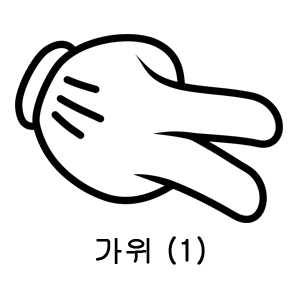
<style>
.page{position:relative;width:300px;height:300px;background:#ffffff}
.page>*{position:absolute;margin:0}
.t1{font:30px "Gulim";color:#000000;font-weight:bold}
</style>
<div class="page">
<p class="t1" style="left:96px;top:236px;width:109px;height:29px">가위 (1)</p>
</div>
